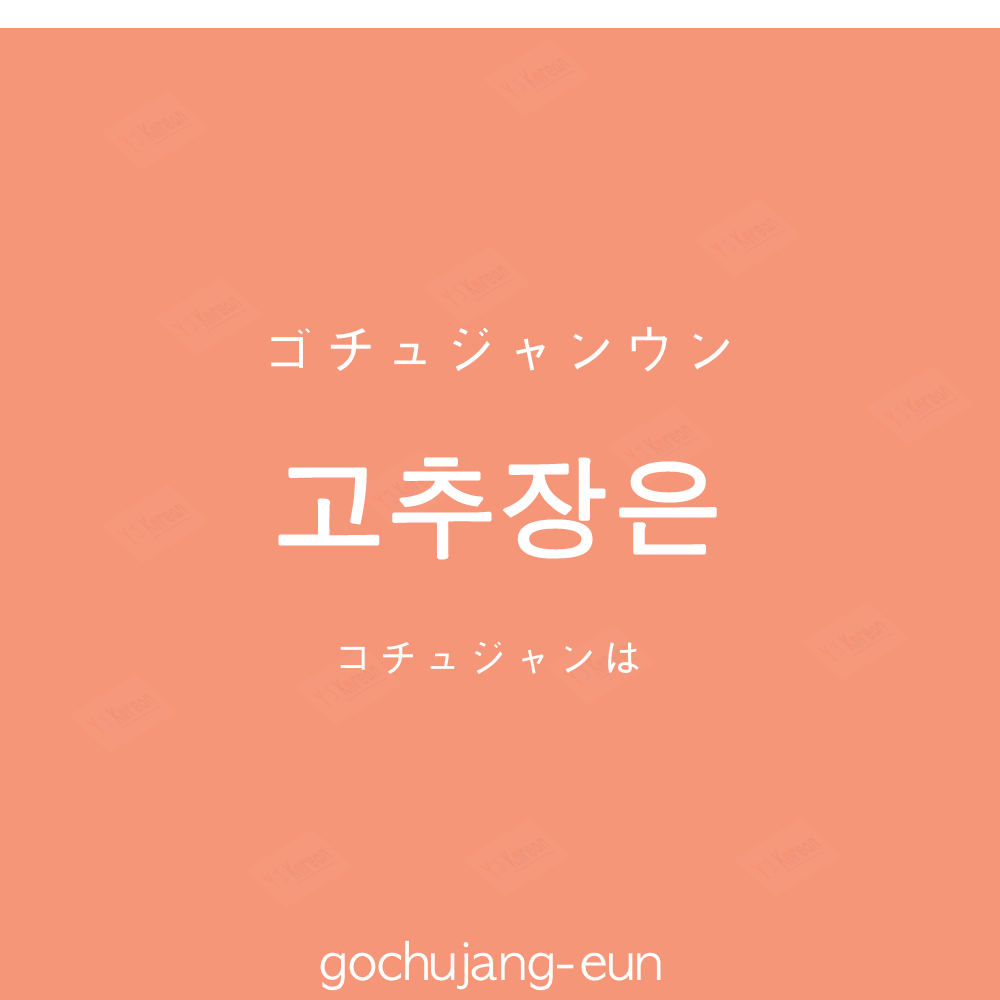
<style>
.page{position:relative;width:1000px;height:1000px;background:#f69679}
.page>*{position:absolute;margin:0}
.t1{font:60px "AppleGothic";color:#ffffff}
.t2{font:110px "AppleGothic";color:#ffffff;font-weight:bold}
.t3{font:45px "AppleGothic";color:#ffffff}
.t4{font:50px "AppleGothic";color:#ffffff}
</style>
<div class="page">
<p class="t1" style="left:271px;top:326px;width:459px;height:46px">ゴチュジャンウン</p>
<p class="t2" style="left:278px;top:457px;width:439px;height:103px">고추장은</p>
<p class="t3" style="left:340px;top:641px;width:299px;height:33px">コチュジャンは</p>
<p class="t4" style="left:320px;top:940px;width:341px;height:51px">gochujang-eun</p>
</div>
